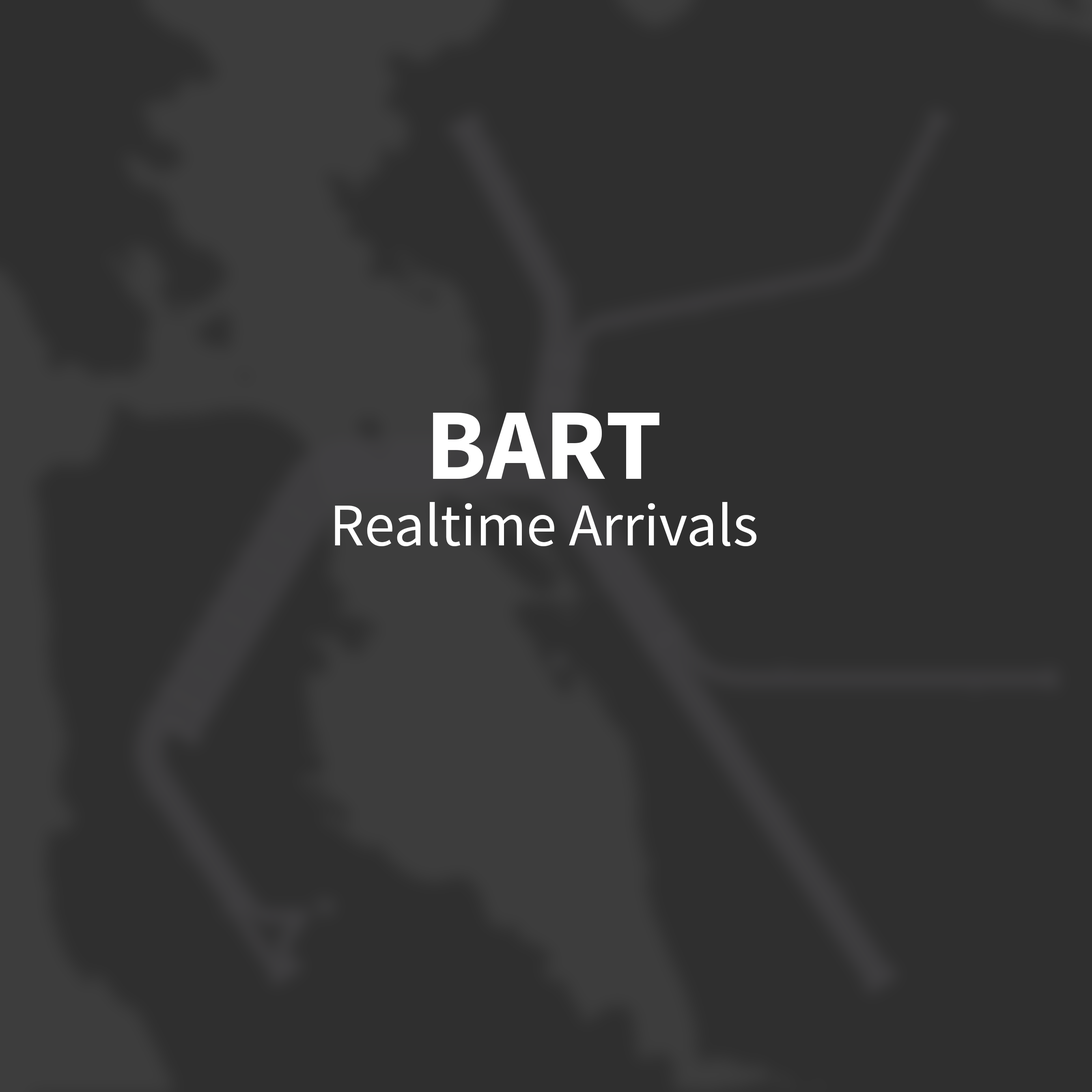
<style>
.page{position:relative;width:1092px;height:1092px;background:#2f2f2f}
.page>*{position:absolute;margin:0}
.t1{font:101.4px "SourceSansPro-Bold";color:#ffffff}
.t2{font:60.9px "SourceSansPro-Regular";color:#ffffff}
</style>
<div class="page">
<p class="t1" style="left:433px;top:413px;width:226px;height:66px">BART</p>
<p class="t2" style="left:335px;top:502px;width:421px;height:45px">Realtime Arrivals</p>
</div>
